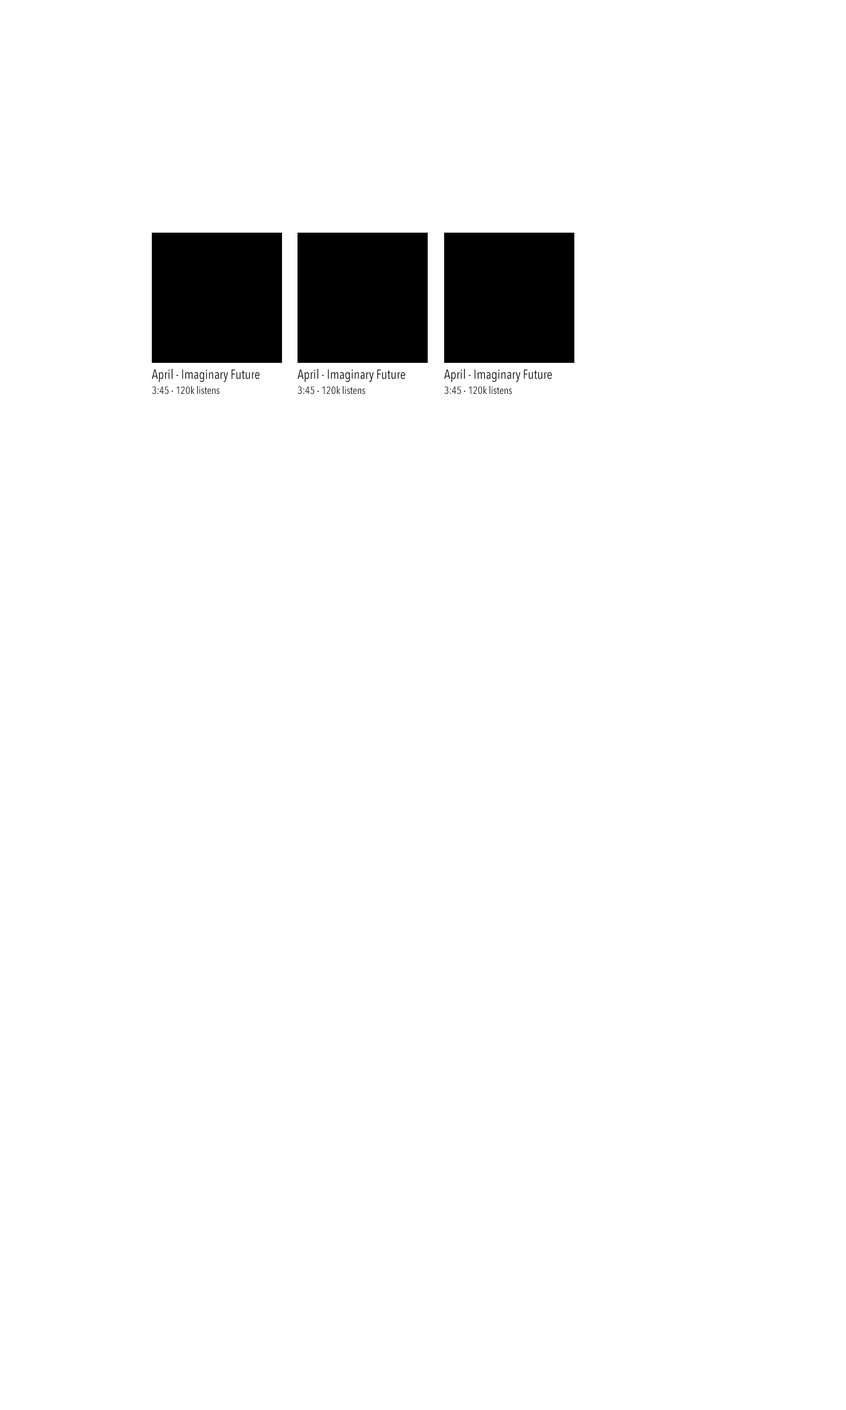
<style>
.page{position:relative;width:846px;height:1410px;background:#ffffff}
.page>*{position:absolute;margin:0}
.t1{font:13.2px "AvenirNextCondensed-Regular";color:#000000}
.t2{font:10.3px "AvenirNextCondensed-Regular";color:#000000}
.t3{font:10.3px "AvenirNextCondensed-Regular";color:#000000;font-weight:bold}
</style>
<div class="page">
<p class="t1" style="left:152px;top:368px;width:107px;height:14px">April - Imaginary Future</p>
<p class="t1" style="left:297px;top:368px;width:108px;height:14px">April - Imaginary Future</p>
<p class="t1" style="left:444px;top:368px;width:108px;height:14px">April - Imaginary Future</p>
<p class="t2" style="left:152px;top:386px;width:67px;height:8px">3:45 <span class="t3">· </span>120k listens</p>
<p class="t2" style="left:297px;top:386px;width:68px;height:8px">3:45 <span class="t3">· </span>120k listens</p>
<p class="t2" style="left:444px;top:386px;width:68px;height:8px">3:45 <span class="t3">· </span>120k listens</p>
</div>
